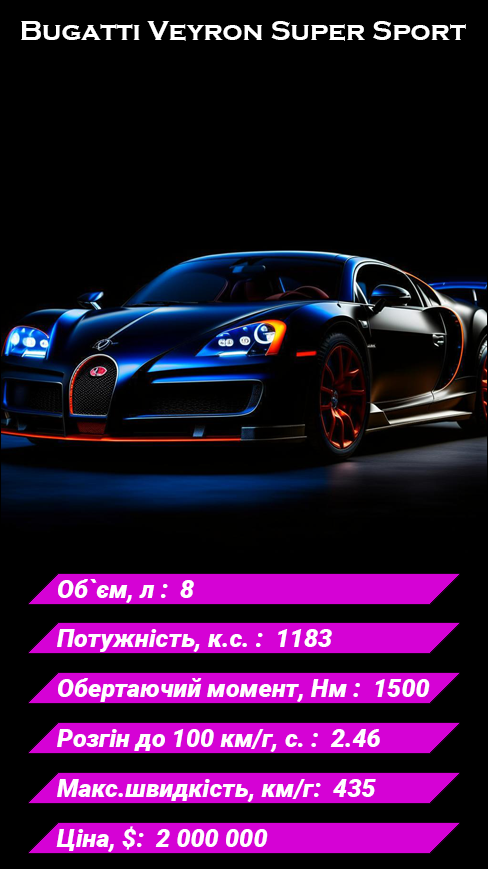
<style>
.page{position:relative;width:488px;height:869px;background:#000000}
.page>*{position:absolute;margin:0}
.t1{font:28px "CopperplateGothic-Bold";color:#ffffff}
.t2{font:25px "Roboto-BlackItalic";color:#ffffff}
</style>
<div class="page">
<p class="t1" style="left:21px;top:21px;width:445px;height:20px">Bugatti Veyron Super Sport</p>
<p class="t2" style="left:58px;top:579px;width:136px;height:24px">Об`єм, л :  8</p>
<p class="t2" style="left:57px;top:629px;width:275px;height:23px">Потужність, к.с. :  1183</p>
<p class="t2" style="left:58px;top:678px;width:372px;height:24px">Обертаючий момент, Нм :  1500</p>
<p class="t2" style="left:57px;top:729px;width:323px;height:23px">Розгін до 100 км/г, с. :  2.46</p>
<p class="t2" style="left:57px;top:779px;width:319px;height:23px">Макс.швидкість, км/г:  435</p>
<p class="t2" style="left:56px;top:826px;width:212px;height:26px">Ціна, $:  2 000 000</p>
</div>
